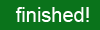
<style>
.page{position:relative;width:100px;height:30px;background:#0a731b}
.page>*{position:absolute;margin:0}
.t1{font:20px "ArialMT";color:#ffffff}
</style>
<div class="page">
<p class="t1" style="left:15px;top:7px;width:74px;height:15px">finished!</p>
</div>
